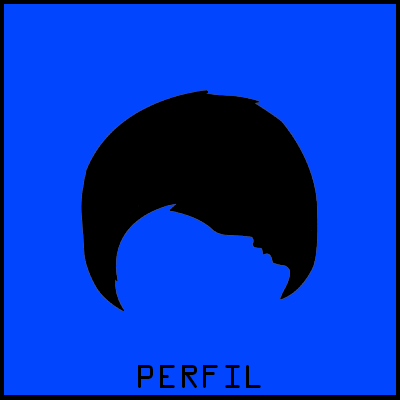
<style>
.page{position:relative;width:400px;height:400px;background:#0145fe}
.page>*{position:absolute;margin:0}
.t1{font:30px "OCRAStd";color:#000000}
</style>
<div class="page">
<p class="t1" style="left:138px;top:365px;width:123px;height:23px">PERFIL</p>
</div>
